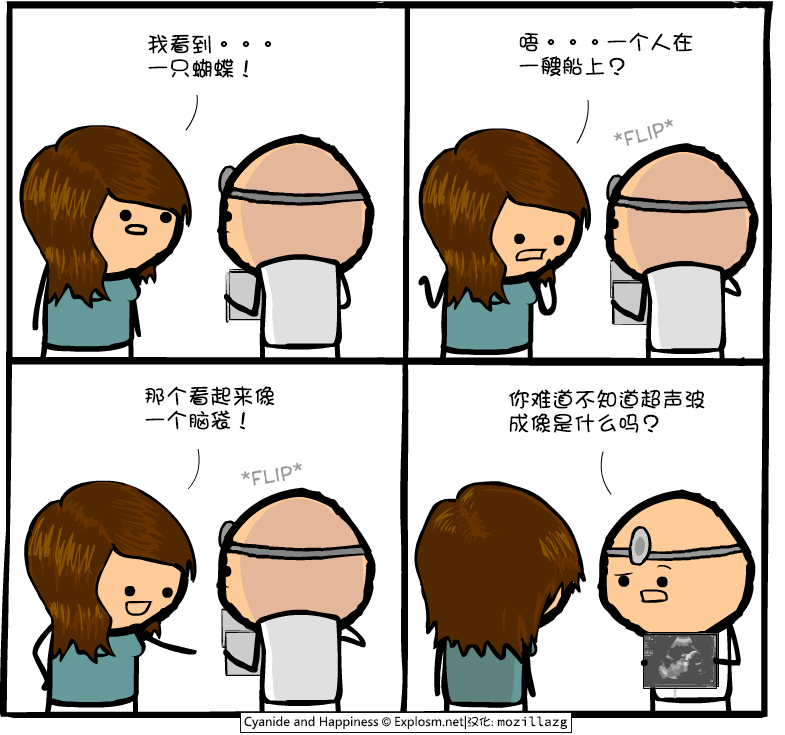
<style>
.page{position:relative;width:785px;height:735px;background:#ffffff}
.page>*{position:absolute;margin:0}
.t1{font:22px/24px "DFGirl";color:#000000}
</style>
<div class="page">
<p class="t1" style="left:148px;top:34px;width:124px;height:44px">我看到。。。<br>一只蝴蝶！</p>
<p class="t1" style="left:519px;top:32px;width:174px;height:45px">唔。。。一个人在<br>一艘船上？</p>
<p class="t1" style="left:145px;top:386px;width:130px;height:44px">那个看起来像<br>一个脑袋！</p>
<p class="t1" style="left:509px;top:389px;width:196px;height:44px">你难道不知道超声波<br>成像是什么吗？</p>
</div>
